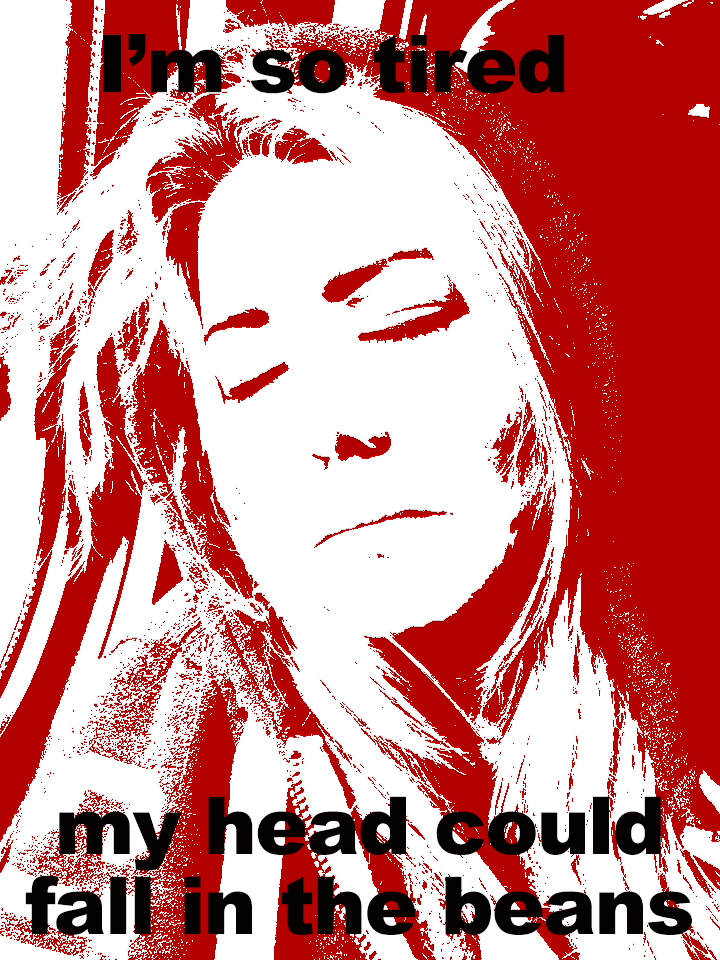
<style>
.page{position:relative;width:720px;height:960px;background:#ffffff}
.page>*{position:absolute;margin:0}
.t1{font:80px "Arial-Black";letter-spacing:-0.025em;color:#040000}
.t2{font:80px/80px "Arial-Black";letter-spacing:-0.025em;color:#040000}
</style>
<div class="page">
<p class="t1" style="left:103px;top:34px;width:462px;height:60px">I’m so tired</p>
<p class="t2" style="left:25px;top:796px;width:667px;height:139px;text-align:center">my head could fall in the beans</p>
</div>
